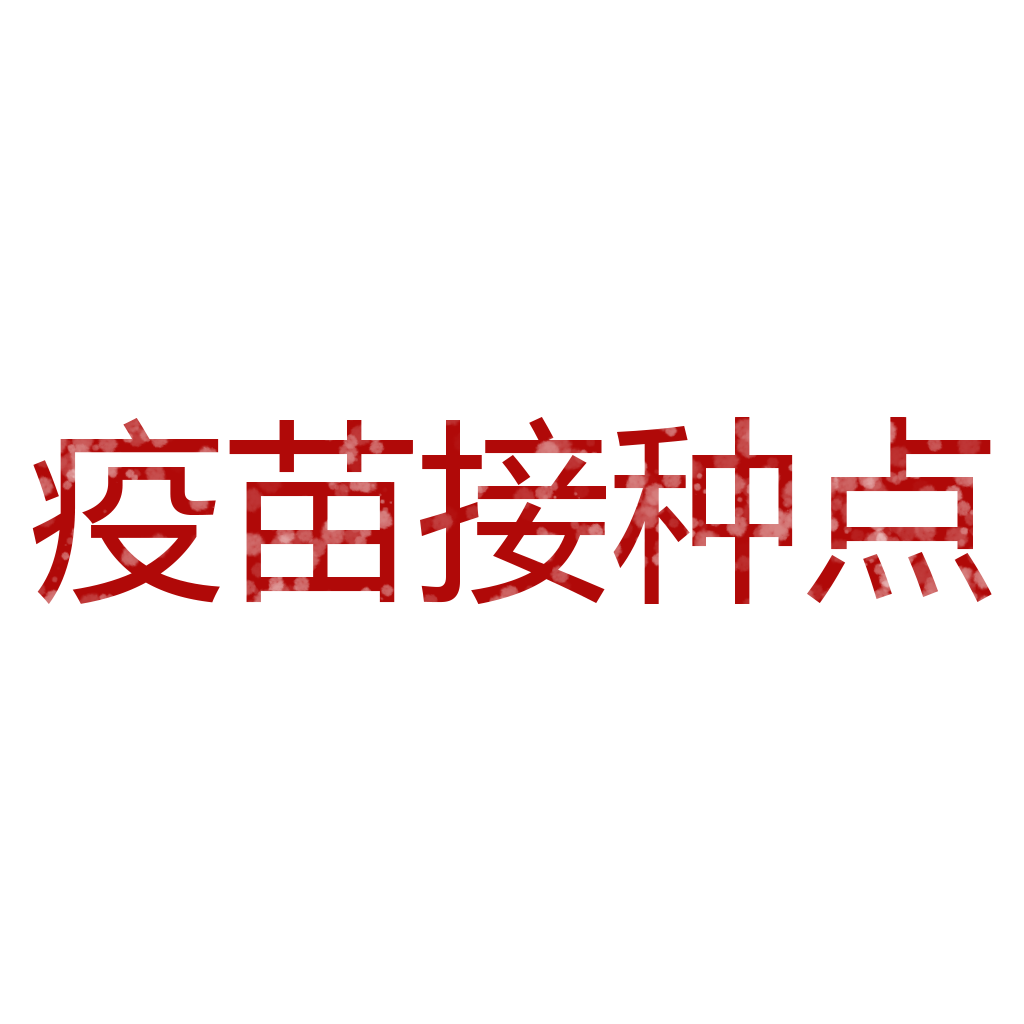
<style>
.page{position:relative;width:1024px;height:1024px;background:#ffffff}
.page>*{position:absolute;margin:0}
.t1{font:193.4px "MicrosoftYaHei";color:#b00908}
</style>
<div class="page">
<p class="t1" style="left:32px;top:417px;width:960px;height:187px">疫苗接种点</p>
</div>
